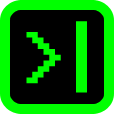
<style>
.page{position:relative;width:114px;height:114px;background:#000000}
.page>*{position:absolute;margin:0}
.t1{font:70px "System";color:#00ff00}
.t2{font:73px "System";color:#00ff00}
</style>
<div class="page">
<p class="t1" style="left:76px;top:21px;width:11px;height:72px">|</p>
<p class="t2" style="left:26px;top:32px;width:35px;height:52px">&gt;</p>
</div>
